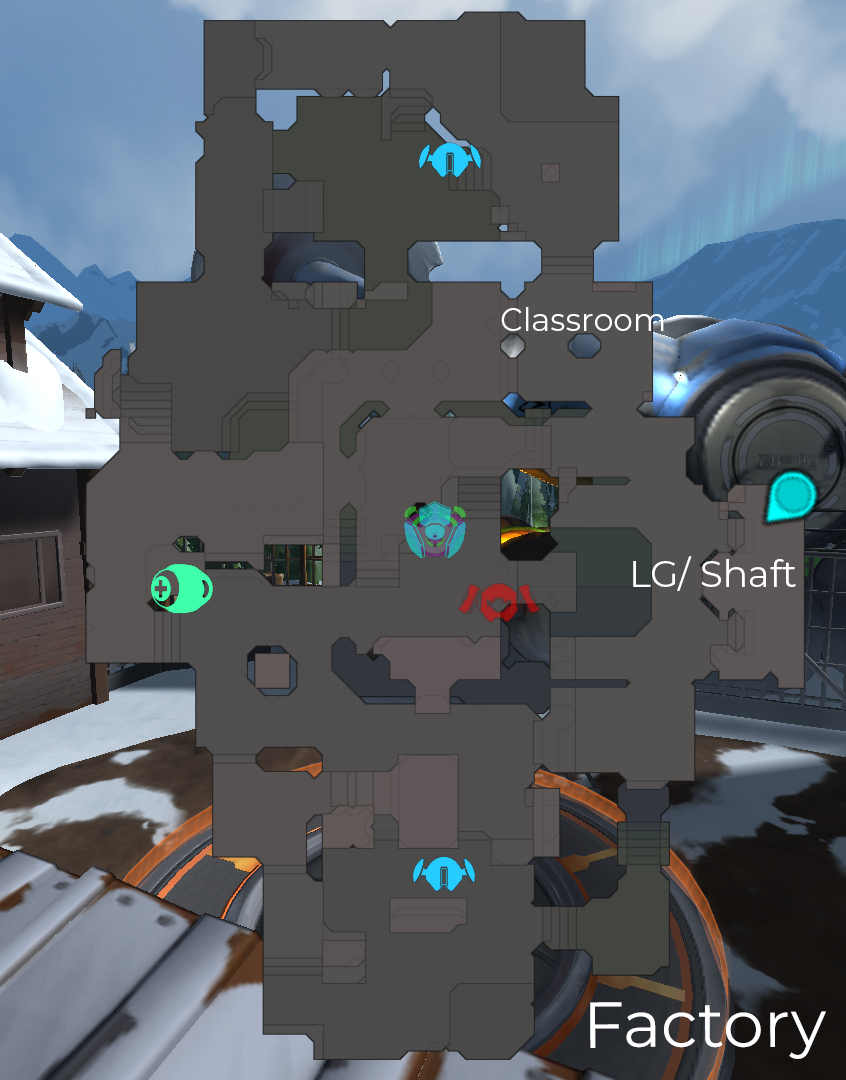
<style>
.page{position:relative;width:846px;height:1080px}
.page>*{position:absolute;margin:0}
.t1{font:31.7px "Montserrat-Regular";color:#ffffff}
.t2{font:36.8px "Montserrat-Regular";color:#ffffff}
.t3{font:65.1px "Montserrat-Regular";color:#ffffff}
</style>
<div class="page">
<p class="t1" style="left:501px;top:307px;width:163px;height:24px">Classroom</p>
<p class="t2" style="left:633px;top:556px;width:163px;height:35px">LG/ Shaft</p>
<p class="t3" style="left:590px;top:1002px;width:236px;height:57px">Factory</p>
</div>
